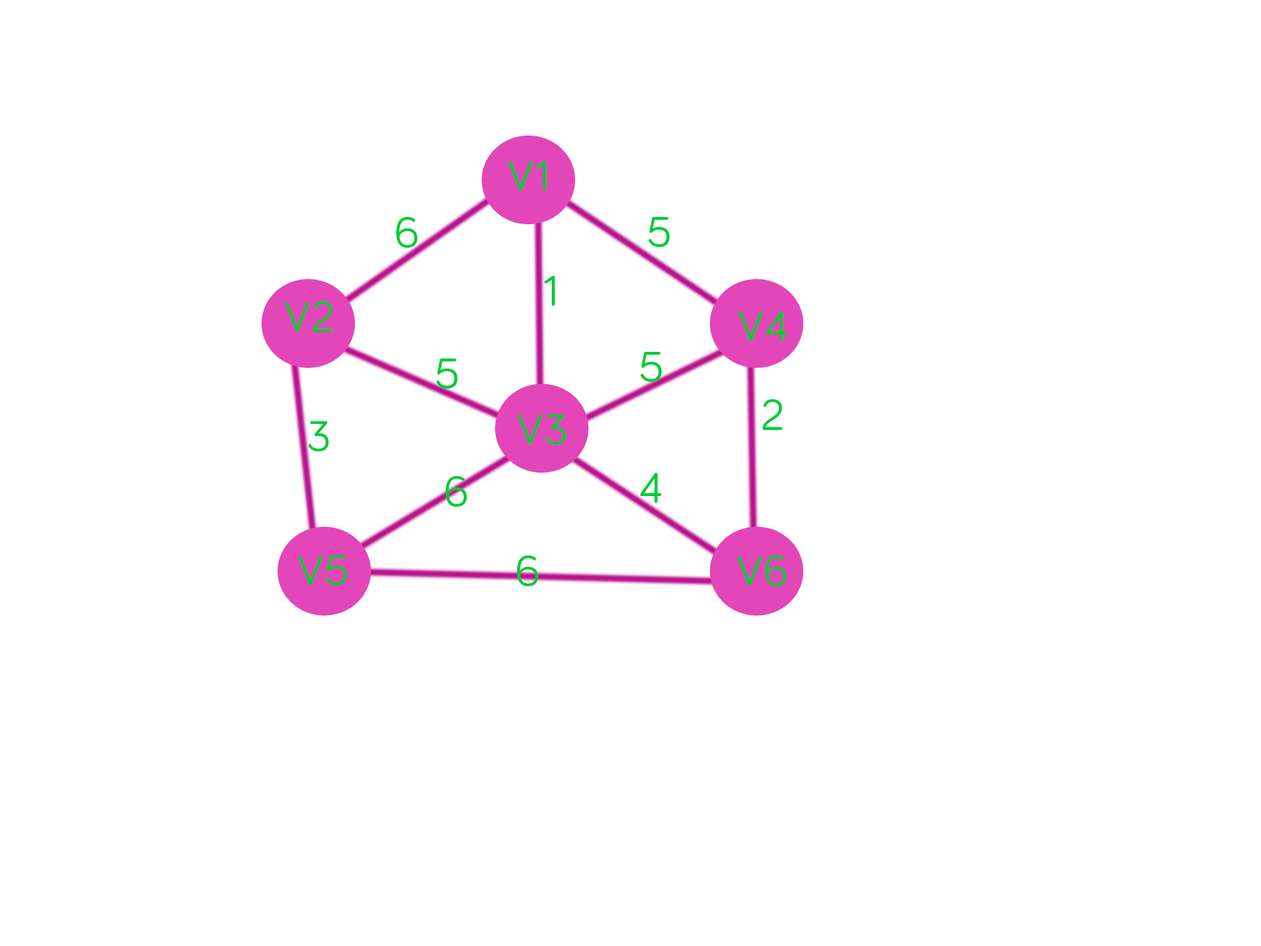
<style>
.page{position:relative;width:1261px;height:946px;background:#ffffff}
.page>*{position:absolute;margin:0}
.t1{font:44.5px "Bariol-Regular";letter-spacing:0.02em;color:#00cc33}
</style>
<div class="page">
<p class="t1" style="left:508px;top:161px;width:38px;height:30px">V1</p>
<p class="t1" style="left:396px;top:217px;width:22px;height:31px">6</p>
<p class="t1" style="left:649px;top:217px;width:21px;height:30px">5</p>
<p class="t1" style="left:544px;top:276px;width:11px;height:30px">1</p>
<p class="t1" style="left:285px;top:301px;width:48px;height:31px">V2</p>
<p class="t1" style="left:739px;top:311px;width:48px;height:30px">V4</p>
<p class="t1" style="left:641px;top:352px;width:21px;height:30px">5</p>
<p class="t1" style="left:436px;top:358px;width:22px;height:30px">5</p>
<p class="t1" style="left:763px;top:399px;width:20px;height:31px">2</p>
<p class="t1" style="left:308px;top:421px;width:21px;height:30px">3</p>
<p class="t1" style="left:518px;top:414px;width:48px;height:30px">V3</p>
<p class="t1" style="left:640px;top:472px;width:22px;height:30px">4</p>
<p class="t1" style="left:446px;top:476px;width:21px;height:30px">6</p>
<p class="t1" style="left:298px;top:555px;width:49px;height:30px">V5</p>
<p class="t1" style="left:517px;top:555px;width:21px;height:31px">6</p>
<p class="t1" style="left:737px;top:555px;width:50px;height:31px">V6</p>
</div>
